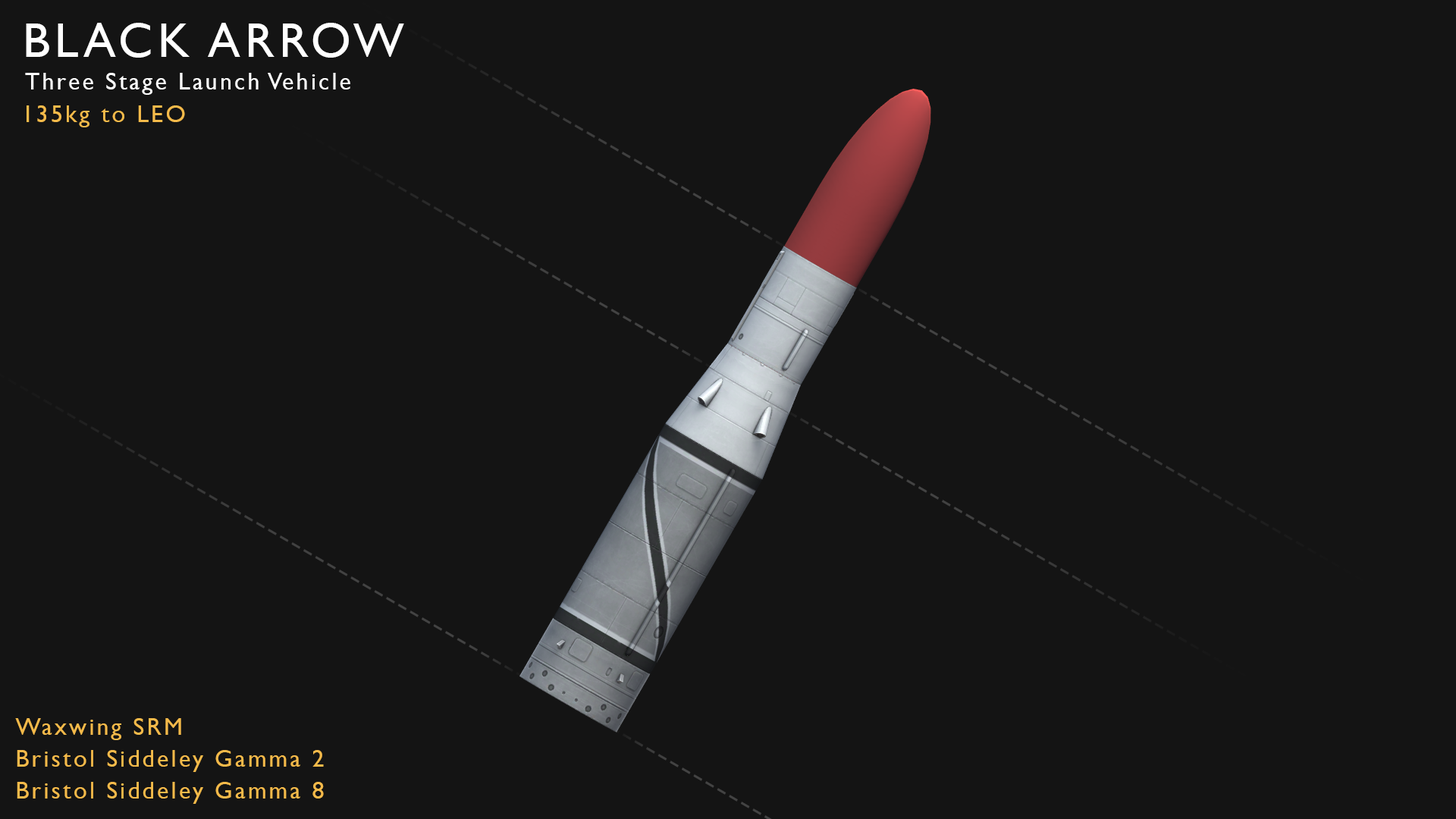
<style>
.page{position:relative;width:1456px;height:819px;background:#141414}
.page>*{position:absolute;margin:0}
.t1{font:48.5px "GillSansMT";letter-spacing:0.1em;color:#ffffff}
.t2{font:24.3px "GillSansMT";letter-spacing:0.1em;color:#ffffff}
.t3{font:24.3px "GillSansMT";letter-spacing:0.1em;color:#f4ba4a}
</style>
<div class="page">
<p class="t1" style="left:26px;top:23px;width:378px;height:35px">BLACK ARROW</p>
<p class="t2" style="left:25px;top:73px;width:325px;height:22px">Three Stage Launch Vehicle</p>
<p class="t3" style="left:27px;top:105px;width:158px;height:22px">135kg to LEO</p>
<p class="t3" style="left:15px;top:718px;width:166px;height:22px">Waxwing SRM</p>
<p class="t3" style="left:17px;top:750px;width:307px;height:22px">Bristol Siddeley Gamma 2</p>
<p class="t3" style="left:17px;top:782px;width:307px;height:22px">Bristol Siddeley Gamma 8</p>
</div>
